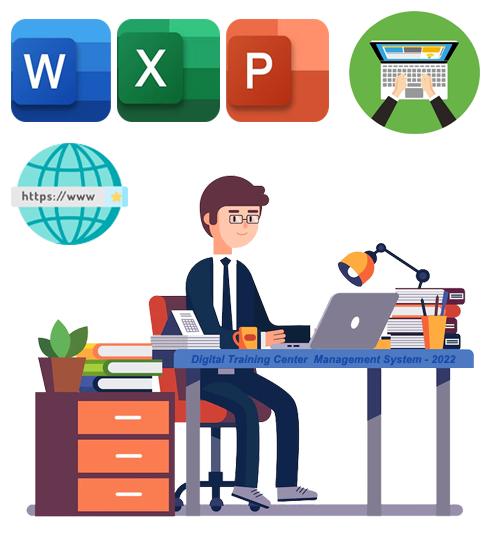
<style>
.page{position:relative;width:500px;height:560px;background:#ffffff}
.page>*{position:absolute;margin:0}
.t1{font:10.9px "Arial-BoldItalicMT";color:#164ca7}
</style>
<div class="page">
<p class="t1" style="left:191px;top:355px;width:265px;height:11px">Digital Training Center  Management System - 2022</p>
</div>
